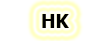
<style>
.page{position:relative;width:111px;height:41px;background:#ffffff}
.page>*{position:absolute;margin:0}
.t1{font:18.7px "Tahoma-Bold";color:#000000}
</style>
<div class="page">
<p class="t1" style="left:42px;top:14px;width:27px;height:14px">HK</p>
</div>
